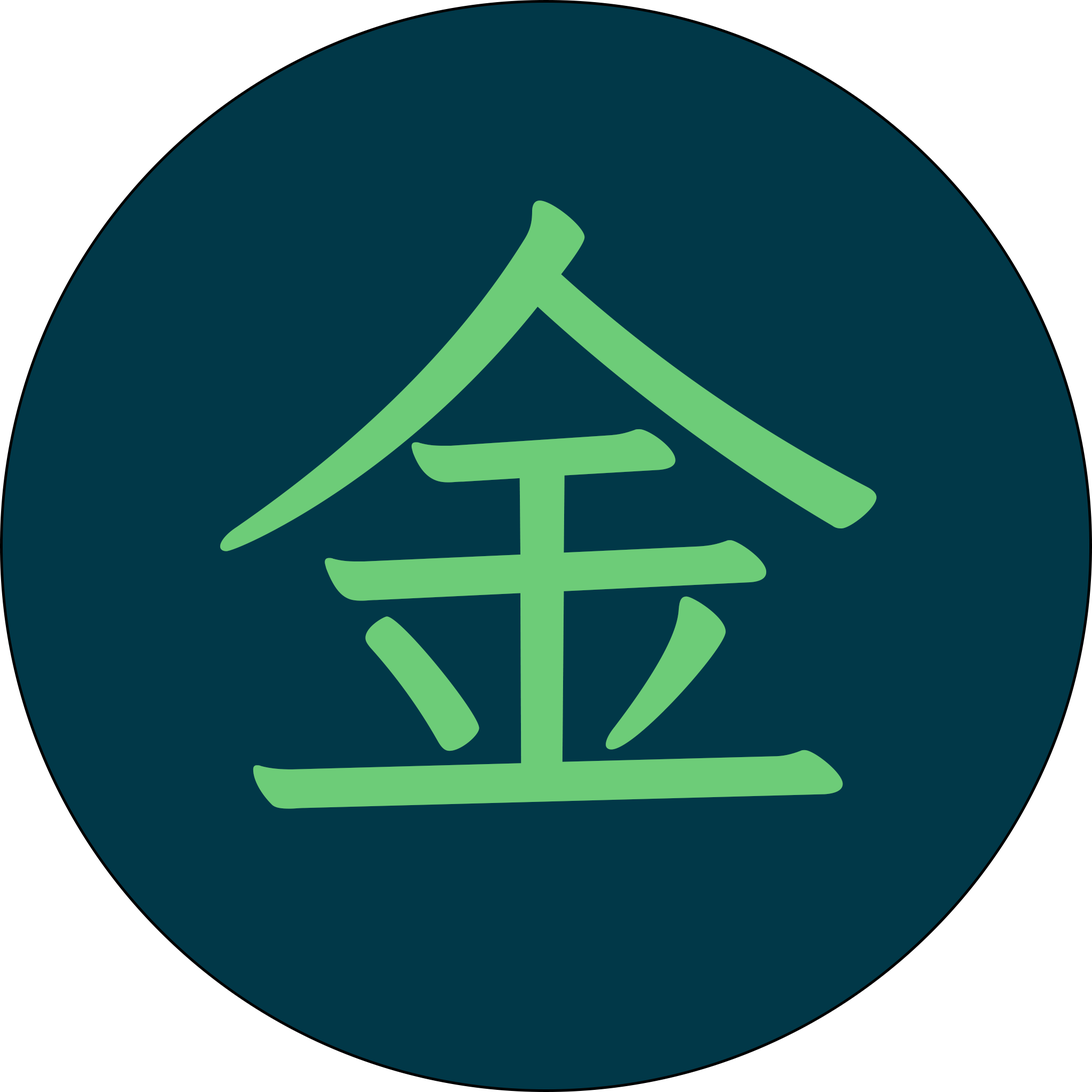
<style>
.page{position:relative;width:1092px;height:1092px;background:#013848}
.page>*{position:absolute;margin:0}
.t1{font:688.6px "Klee-Demibold";color:#6dcc78}
</style>
<div class="page">
<p class="t1" style="left:220px;top:200px;width:657px;height:609px">金</p>
</div>
